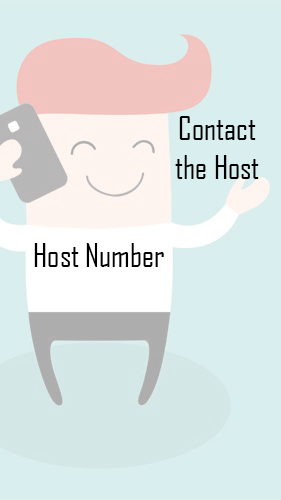
<style>
.page{position:relative;width:281px;height:500px;background:#d9eeee}
.page>*{position:absolute;margin:0}
.t1{font:32px "AgencyFB-Reg";color:#000000}
</style>
<div class="page">
<p class="t1" style="left:175px;top:116px;width:84px;height:63px;text-align:center">Contact <br>the Host</p>
<p class="t1" style="left:34px;top:243px;width:130px;height:24px">Host Number</p>
</div>
